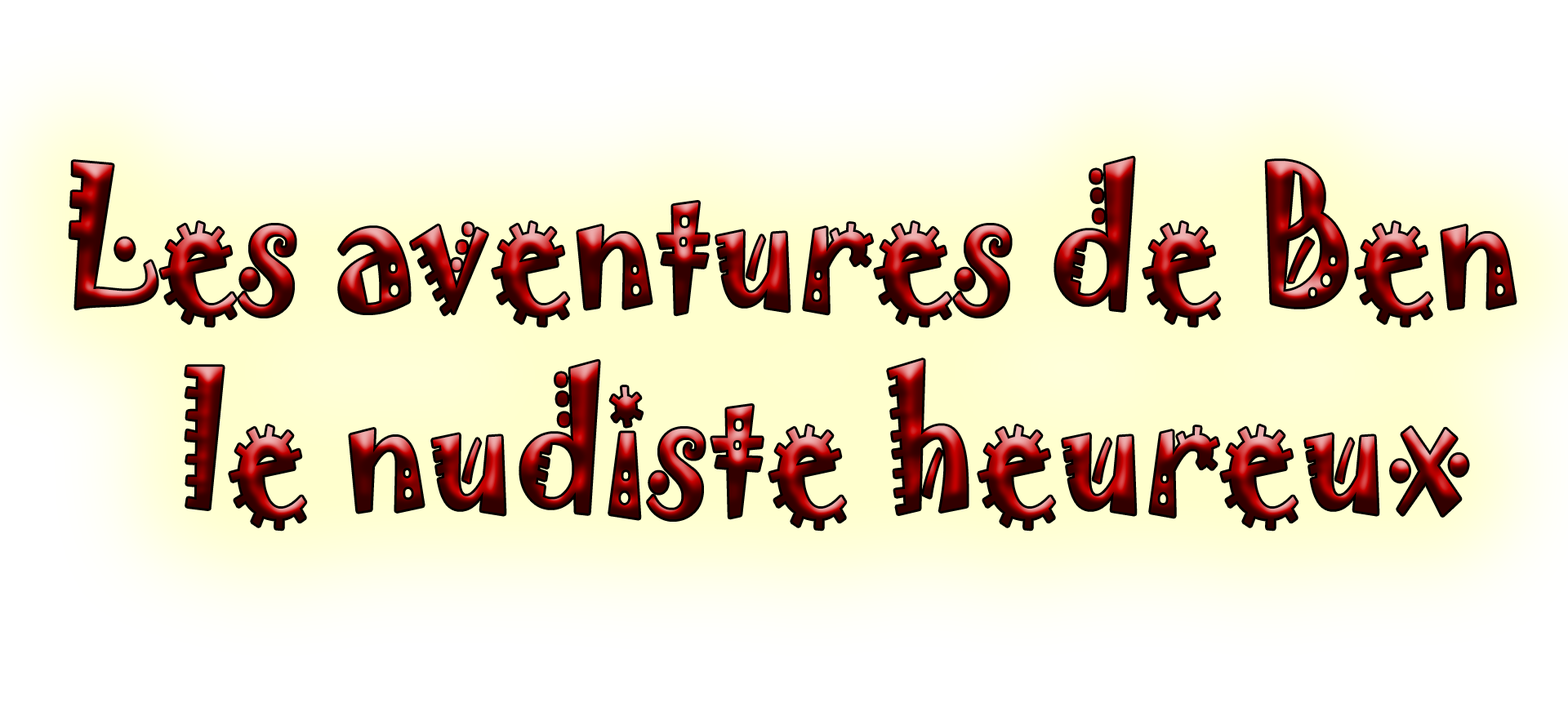
<style>
.page{position:relative;width:1568px;height:725px;background:#ffffff}
.page>*{position:absolute;margin:0}
.t1{font:40.7px "Jokerman-Regular";scale:0.82 1}
</style>
<div class="page">
<p class="t1" style="left:70px;top:158px;width:1445px;height:371px;text-align:center">Les aventures de Ben <br> le nudiste heureux</p>
</div>
